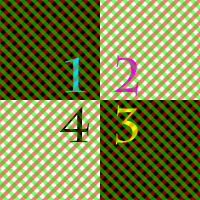
<style>
.page{position:relative;width:200px;height:200px}
.page>*{position:absolute;margin:0}
.t1{font:48px "CharlemagneStd-Bold"}
</style>
<div class="page">
<p class="t1" style="left:65px;top:57px;width:21px;height:36px">1</p>
<p class="t1" style="left:113px;top:55px;width:26px;height:41px">2</p>
<p class="t1" style="left:59px;top:106px;width:31px;height:37px">4</p>
<p class="t1" style="left:115px;top:105px;width:23px;height:40px">3</p>
</div>
